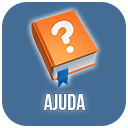
<style>
.page{position:relative;width:128px;height:128px;background:#446d95}
.page>*{position:absolute;margin:0}
.t1{font:22px "BebasNeue";color:#ffffff}
</style>
<div class="page">
<p class="t1" style="left:44px;top:94px;width:41px;height:16px">ajuda</p>
</div>
